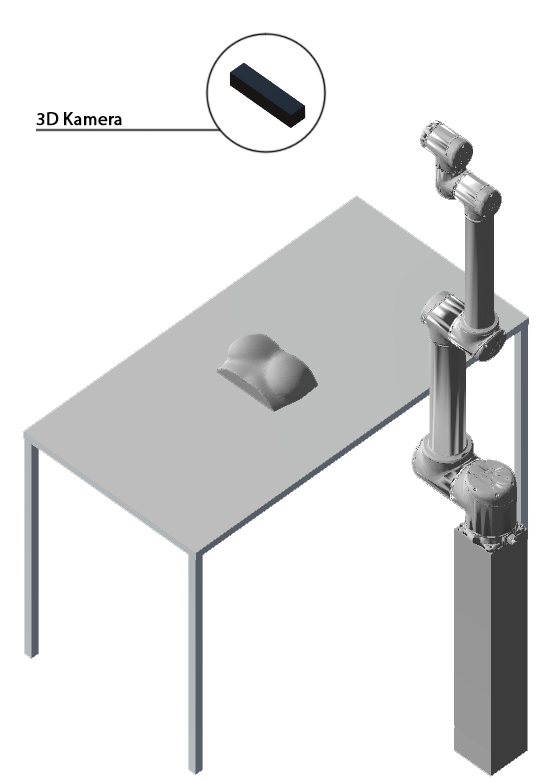
<style>
.page{position:relative;width:555px;height:782px;background:#ffffff}
.page>*{position:absolute;margin:0}
.t1{font:18px "MyriadPro-Regular";color:#000000;font-weight:bold}
</style>
<div class="page">
<p class="t1" style="left:36px;top:112px;width:86px;height:14px">3D Kamera</p>
</div>
